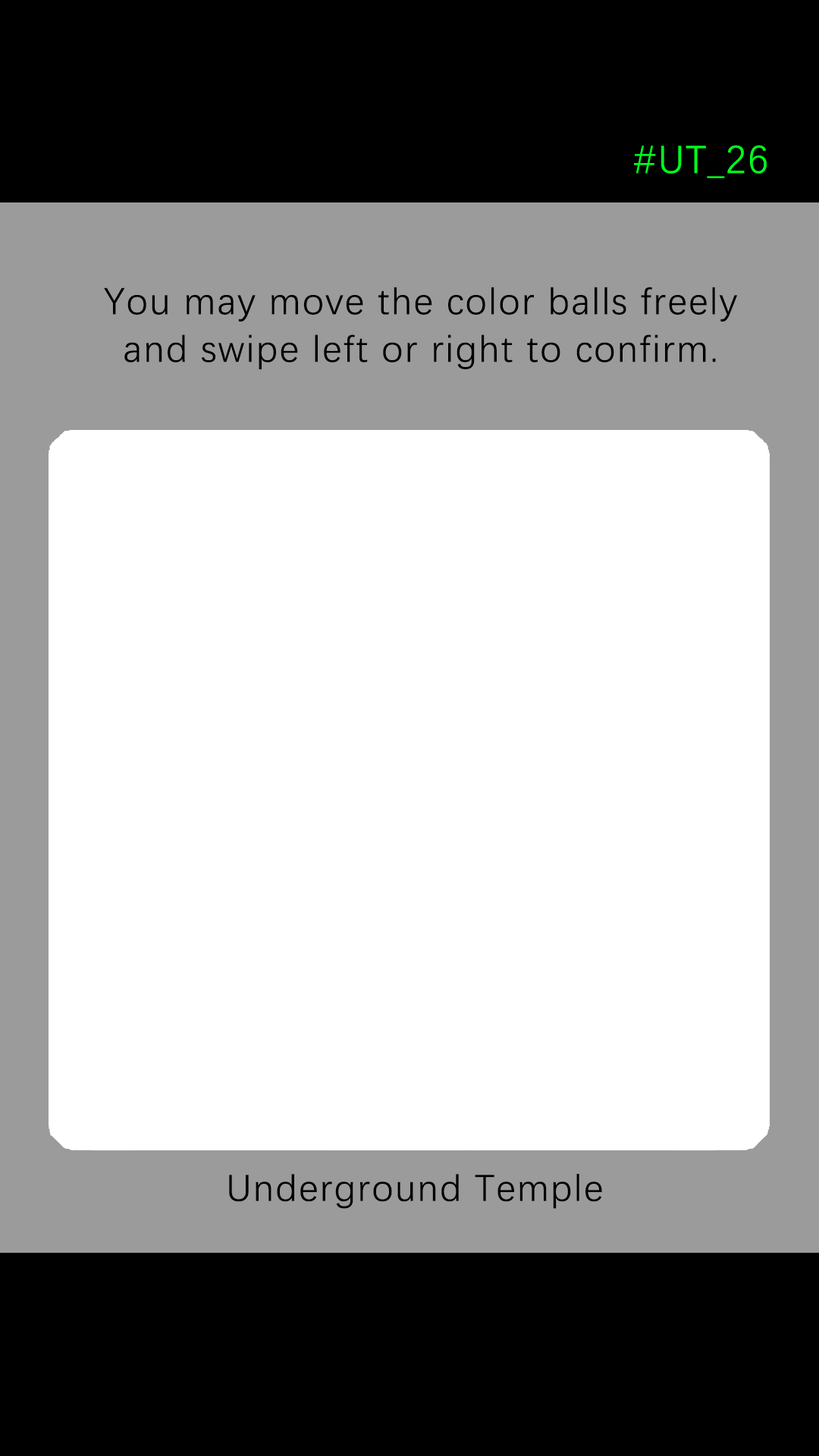
<style>
.page{position:relative;width:819px;height:1456px;background:#ffffff}
.page>*{position:absolute;margin:0}
.t1{font:39.2px "DengXian-Regular";letter-spacing:0.04em;color:#00ff1e}
.t2{font:37.9px/47.6px "DengXian-Regular";letter-spacing:0.04em;color:#000000}
.t3{font:37.9px "DengXian-Regular";letter-spacing:0.04em;color:#000000}
</style>
<div class="page">
<p class="t1" style="left:634px;top:145px;width:133px;height:33px">#UT_26</p>
<p class="t2" style="left:104px;top:287px;width:633px;height:82px;text-align:center">You may move the color balls freely<br>and swipe left or right to confirm.</p>
<p class="t3" style="left:229px;top:1174px;width:373px;height:35px">Underground Temple</p>
</div>
